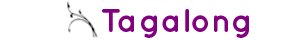
<style>
.page{position:relative;width:300px;height:40px;background:#ffffff}
.page>*{position:absolute;margin:0}
.t1{font:33.3px "QuicksandBold-Regular";color:#81017e}
</style>
<div class="page">
<p class="t1" style="left:102px;top:9px;width:147px;height:29px">Tagalong</p>
</div>
